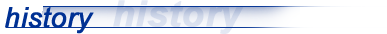
<style>
.page{position:relative;width:387px;height:34px;background:#ffffff}
.page>*{position:absolute;margin:0}
.t1{font:28px "Arial-ItalicMT";color:#003194;font-weight:bold}
</style>
<div class="page">
<p class="t1" style="left:5px;top:7px;width:89px;height:27px">history</p>
</div>
